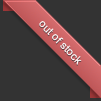
<style>
.page{position:relative;width:101px;height:101px;background:#333333}
.page>*{position:absolute;margin:0}
.t1{font:11px "ArialMT";color:#ffffff}
</style>
<div class="page">
<p class="t1" style="left:39px;top:21px;width:43px;height:44px;rotate:46deg">out of stock</p>
</div>
